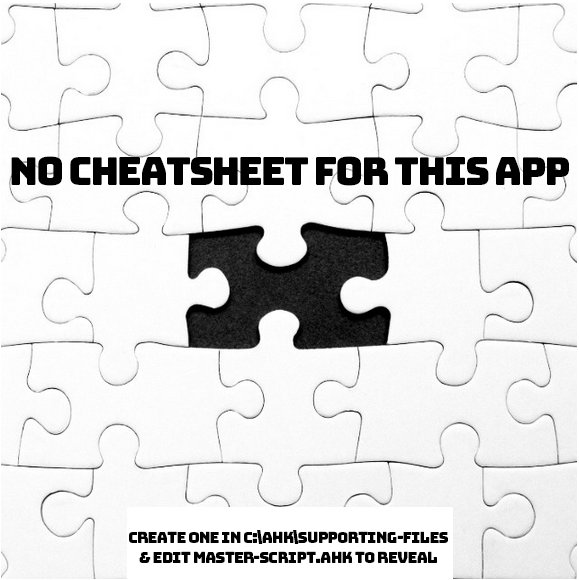
<style>
.page{position:relative;width:579px;height:580px}
.page>*{position:absolute;margin:0}
.t1{font:38.5px "Bungee-Regular";letter-spacing:-0.06em;color:#000000}
.t2{font:15.5px/20.6px "Bungee-Regular";letter-spacing:-0.06em;color:#000000}
</style>
<div class="page">
<p class="t1" style="left:11px;top:156px;width:558px;height:30px">NO CHEATSHEET FOR THIS APP</p>
<p class="t2" style="left:129px;top:530px;width:319px;height:33px;text-align:center">Create one in C:\AHK\SUPPORTING-FILES<br>&amp; Edit master-script.ahk to reveal</p>
</div>
